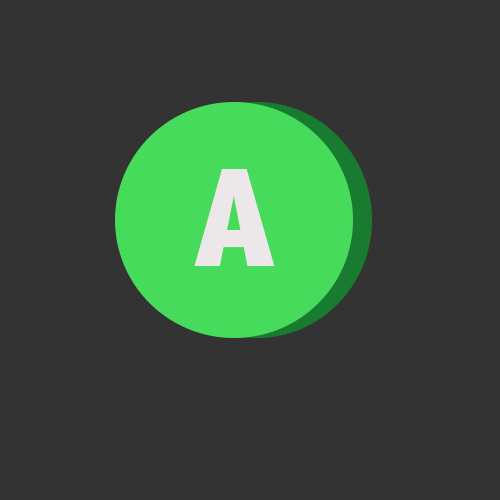
<style>
.page{position:relative;width:500px;height:500px;background:#333333}
.page>*{position:absolute;margin:0}
.t1{font:142.2px "AbadiMT-CondensedExtraBold";letter-spacing:0.038em;color:#ece7e8;scale:1.09 1}
</style>
<div class="page">
<p class="t1" style="left:194px;top:169px;width:81px;height:97px">A</p>
</div>
